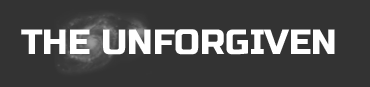
<style>
.page{position:relative;width:370px;height:87px;background:#333333}
.page>*{position:absolute;margin:0}
.t1{font:35px "RussoOne-Regular";color:#ffffff}
</style>
<div class="page">
<p class="t1" style="left:21px;top:29px;width:314px;height:26px">THE UNFORGIVEN</p>
</div>
